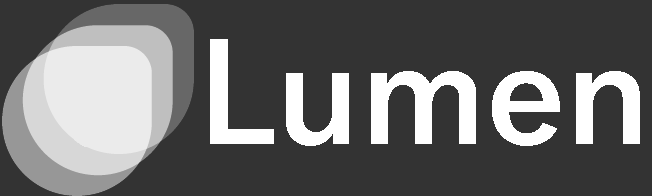
<style>
.page{position:relative;width:652px;height:196px;background:#333333}
.page>*{position:absolute;margin:0}
.t1{font:150px "PostGrotesk-Medium";color:#ffffff}
</style>
<div class="page">
<p class="t1" style="left:210px;top:39px;width:430px;height:107px">Lumen</p>
</div>
